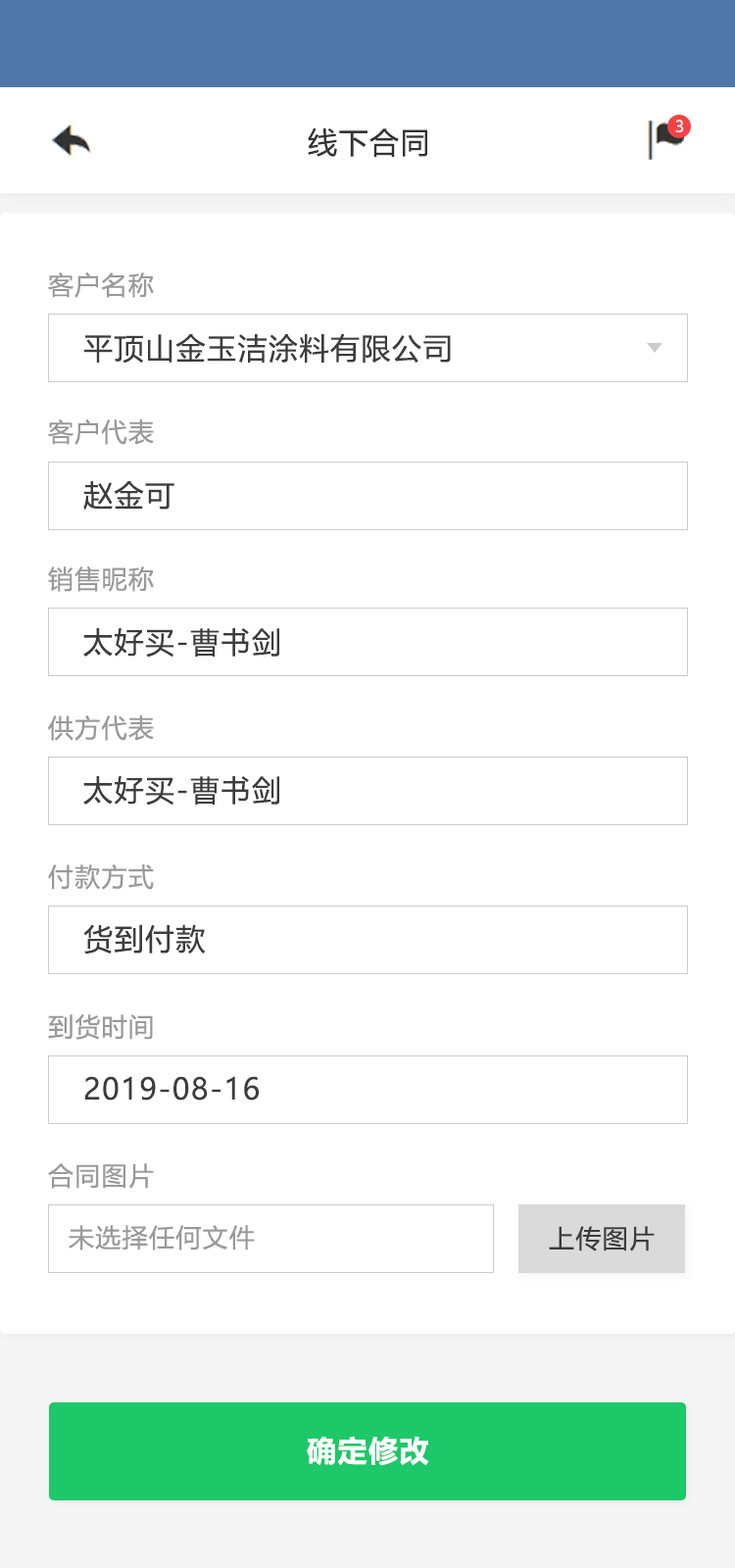
<style>
.page{position:relative;width:735px;height:1568px;background:#ffffff}
.page>*{position:absolute;margin:0}
.t1{font:15.7px "MicrosoftYaHeiUI";color:#ffffff}
.t2{font:29.4px "MicrosoftYaHeiUI";letter-spacing:0.05em;color:#333333}
.t3{font:25.5px "MicrosoftYaHeiUI";letter-spacing:0.05em;color:#999999}
.t4{font:29.4px "MicrosoftYaHeiUI";letter-spacing:0.05em;color:#3c3c3c}
.t5{font:25.5px "MicrosoftYaHeiUI";letter-spacing:0.05em;color:#3c3c3c}
.t6{font:29.4px "MicrosoftYaHeiUI-Bold";letter-spacing:0.05em;color:#ffffff}
</style>
<div class="page">
<p class="t1" style="left:675px;top:120px;width:9px;height:12px">3</p>
<p class="t2" style="left:308px;top:127px;width:119px;height:31px">线下合同</p>
<p class="t3" style="left:48px;top:272px;width:106px;height:26px">客户名称</p>
<p class="t4" style="left:83px;top:333px;width:368px;height:31px">平顶山金玉洁涂料有限公司</p>
<p class="t3" style="left:48px;top:419px;width:106px;height:26px">客户代表</p>
<p class="t4" style="left:83px;top:481px;width:91px;height:30px">赵金可</p>
<p class="t3" style="left:48px;top:566px;width:106px;height:26px">销售昵称</p>
<p class="t4" style="left:83px;top:627px;width:196px;height:31px">太好买-曹书剑</p>
<p class="t3" style="left:48px;top:715px;width:106px;height:26px">供方代表</p>
<p class="t4" style="left:83px;top:775px;width:196px;height:31px">太好买-曹书剑</p>
<p class="t3" style="left:48px;top:864px;width:106px;height:26px">付款方式</p>
<p class="t4" style="left:83px;top:924px;width:123px;height:31px">货到付款</p>
<p class="t3" style="left:48px;top:1014px;width:105px;height:26px">到货时间</p>
<p class="t4" style="left:84px;top:1076px;width:175px;height:25px">2019-08-16</p>
<p class="t3" style="left:48px;top:1163px;width:106px;height:26px">合同图片</p>
<p class="t3" style="left:69px;top:1225px;width:186px;height:25px">未选择任何文件</p>
<p class="t5" style="left:549px;top:1226px;width:106px;height:25px">上传图片</p>
<p class="t6" style="left:307px;top:1436px;width:122px;height:30px">确定修改</p>
</div>
